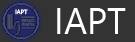
<style>
.page{position:relative;width:135px;height:42px;background:#333333}
.page>*{position:absolute;margin:0}
.t1{font:6px "SegoeUIHistoric";color:#ffffff}
.t2{font:36px "SegoeUIHistoric";color:#ffffff}
</style>
<div class="page">
<p class="t1" style="left:15px;top:9px;width:13px;height:6px">IAPT</p>
<p class="t2" style="left:57px;top:8px;width:69px;height:26px">IAPT</p>
</div>
